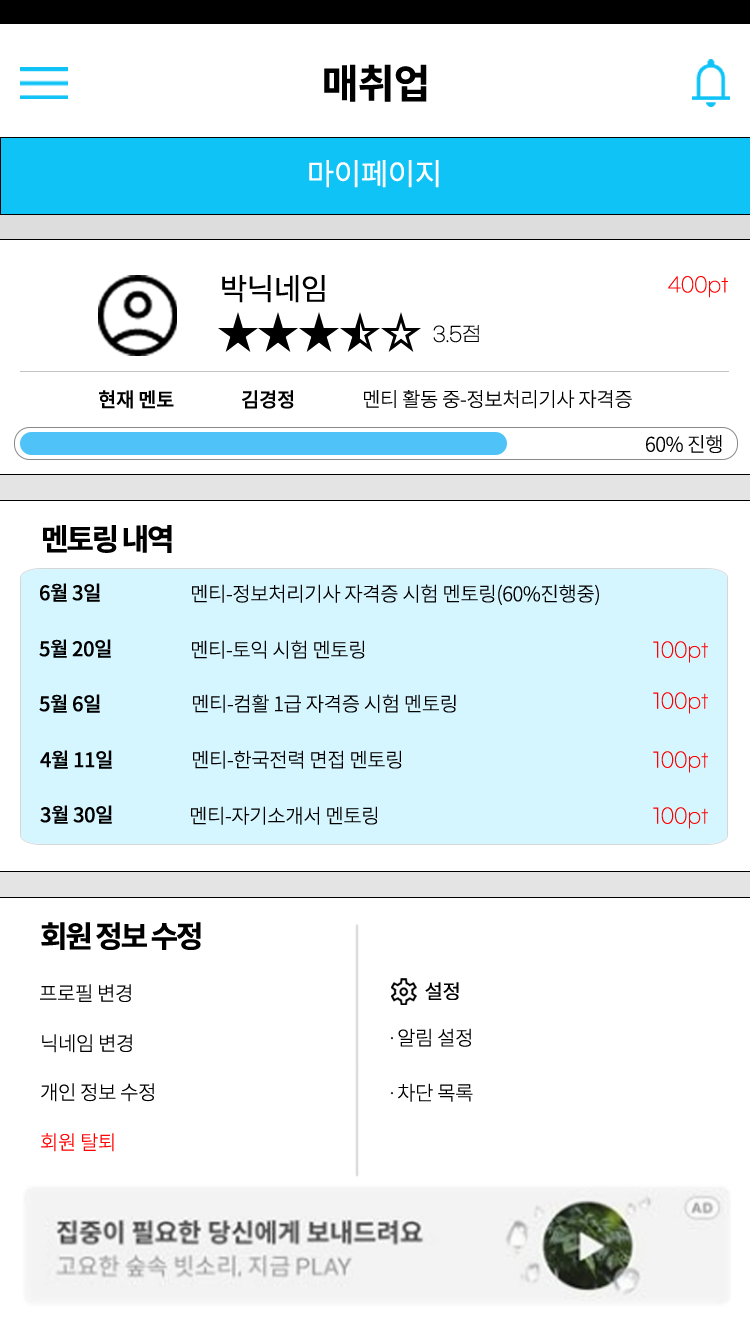
<style>
.page{position:relative;width:750px;height:1334px;background:#ffffff}
.page>*{position:absolute;margin:0}
.t1{font:40px "NotoSansKR-Bold";letter-spacing:-0.02em;color:#000000}
.t2{font:30px "NotoSansKR-Regular";letter-spacing:-0.02em;color:#fefefe}
.t3{font:30px "NotoSansKR-Regular";letter-spacing:-0.02em;color:#000000}
.t4{font:20px "GmarketSansLight";letter-spacing:-0.02em;color:#ff0000}
.t5{font:20px "GmarketSansLight";letter-spacing:-0.02em;color:#000000}
.t6{font:20px "NotoSansKR-Medium";letter-spacing:-0.02em;color:#000000}
.t7{font:20px "NotoSansKR-Light";letter-spacing:-0.02em;color:#000000}
.t8{font:30px "NotoSansKR-Bold";letter-spacing:-0.075em;color:#000000}
.t9{font:20px "NotoSansKR-Regular";letter-spacing:-0.02em;color:#000000}
.t10{font:20px "NotoSansKR-Light";letter-spacing:-0.02em;color:#ff0000}
</style>
<div class="page">
<p class="t1" style="left:324px;top:64px;width:103px;height:38px">매취업</p>
<p class="t2" style="left:309px;top:160px;width:130px;height:28px">마이페이지</p>
<p class="t3" style="left:222px;top:275px;width:103px;height:28px">박닉네임</p>
<p class="t4" style="left:668px;top:276px;width:60px;height:22px">400pt</p>
<p class="t5" style="left:433px;top:325px;width:46px;height:18px">3.5점</p>
<p class="t6" style="left:99px;top:390px;width:75px;height:19px">현재 멘토</p>
<p class="t6" style="left:242px;top:390px;width:52px;height:19px">김경정</p>
<p class="t7" style="left:364px;top:390px;width:268px;height:19px">멘티 활동 중-정보처리기사 자격증 멘토링 중</p>
<p class="t7" style="left:646px;top:435px;width:76px;height:18px">60% 진행</p>
<p class="t8" style="left:43px;top:525px;width:129px;height:28px">멘토링 내역</p>
<p class="t6" style="left:40px;top:583px;width:60px;height:19px">6월 3일</p>
<p class="t7" style="left:192px;top:584px;width:407px;height:22px">멘티-정보처리기사 자격증 시험 멘토링(60%진행중)</p>
<p class="t6" style="left:39px;top:639px;width:72px;height:19px">5월 20일</p>
<p class="t7" style="left:192px;top:640px;width:173px;height:19px">멘티-토익 시험 멘토링</p>
<p class="t4" style="left:653px;top:641px;width:55px;height:22px">100pt</p>
<p class="t6" style="left:39px;top:694px;width:61px;height:19px">5월 6일</p>
<p class="t7" style="left:193px;top:694px;width:263px;height:19px">멘티-컴활 1급 자격증 시험 멘토링</p>
<p class="t4" style="left:653px;top:692px;width:55px;height:22px">100pt</p>
<p class="t6" style="left:40px;top:750px;width:72px;height:19px">4월 11일</p>
<p class="t7" style="left:193px;top:750px;width:209px;height:19px">멘티-한국전력 면접 멘토링</p>
<p class="t4" style="left:653px;top:751px;width:55px;height:22px">100pt</p>
<p class="t6" style="left:40px;top:805px;width:72px;height:19px">3월 30일</p>
<p class="t7" style="left:191px;top:806px;width:187px;height:19px">멘티-자기소개서 멘토링</p>
<p class="t4" style="left:653px;top:807px;width:55px;height:22px">100pt</p>
<p class="t8" style="left:41px;top:922px;width:160px;height:28px">회원 정보 수정</p>
<p class="t7" style="left:40px;top:984px;width:91px;height:18px">프로필 변경</p>
<p class="t9" style="left:425px;top:982px;width:34px;height:18px">설정</p>
<p class="t7" style="left:42px;top:1034px;width:90px;height:19px">닉네임 변경</p>
<p class="t7" style="left:390px;top:1028px;width:81px;height:19px">·알림 설정</p>
<p class="t7" style="left:41px;top:1083px;width:113px;height:19px">개인 정보 수정</p>
<p class="t7" style="left:390px;top:1083px;width:83px;height:19px">·차단 목록</p>
<p class="t10" style="left:41px;top:1133px;width:73px;height:19px">회원 탈퇴</p>
</div>
